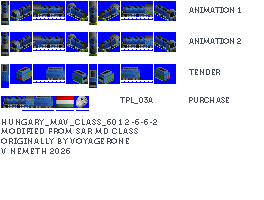
<style>
.page{position:relative;width:264px;height:200px;background:#ffffff}
.page>*{position:absolute;margin:0}
.t1{font:8px "Museo700-Regular";color:#444c5c;text-transform:uppercase}
.t2{font:8px "Museo700-Regular";letter-spacing:0.075em;color:#444c5c;text-transform:uppercase}
</style>
<div class="page">
<p class="t1" style="left:189px;top:7px;width:52px;height:6px">Animation 1</p>
<p class="t1" style="left:189px;top:38px;width:52px;height:6px">Animation 2</p>
<p class="t1" style="left:189px;top:69px;width:31px;height:6px">Tender</p>
<p class="t1" style="left:120px;top:97px;width:33px;height:7px">TPL_03A</p>
<p class="t1" style="left:189px;top:97px;width:40px;height:6px">Purchase</p>
<p class="t2" style="left:1px;top:119px;width:156px;height:35px">Hungary_MAV_Class_601 2-6-6-2<br>modified from SAR MD CLASS<br>originally by voyagerone<br>v nemeth 2026</p>
</div>
